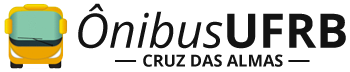
<style>
.page{position:relative;width:350px;height:72px;background:#ffffff}
.page>*{position:absolute;margin:0}
.t1{font:47.4px "OpenSans-Italic";color:#131313}
.t2{font:47.4px "OpenSans-Bold";color:#131313}
.t3{font:16.5px "OpenSans-Bold";color:#131313}
</style>
<div class="page">
<p class="t1" style="left:78px;top:3px;width:268px;height:46px">Ônibus<span class="t2">UFRB</span></p>
<p class="t3" style="left:143px;top:54px;width:140px;height:13px">CRUZ DAS ALMAS</p>
</div>
